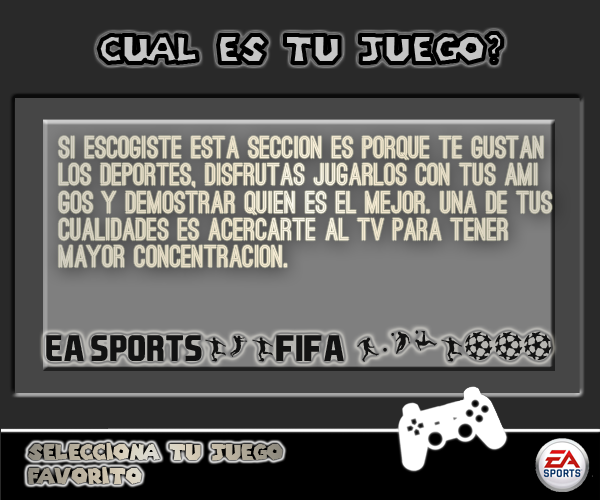
<style>
.page{position:relative;width:600px;height:500px;background:#292929}
.page>*{position:absolute;margin:0}
.t1{font:38.2px "SuperMarioGalaxy";scale:0.97 1}
.t2{font:29.4px "OstrichSans-Bold";color:#ece1cb;scale:0.97 1}
.t3{font:35.3px "EASPORTS";color:#121212;scale:0.97 1}
.t4{font:35.3px "SoccerII";color:#121212;scale:0.97 1}
.t5{font:35.3px "Premiership";color:#121212;scale:0.97 1}
.t6{font:21.6px/33px "SuperMarioGalaxy";scale:0.97 1}
</style>
<div class="page">
<p class="t1" style="left:98px;top:33px;width:405px;height:30px">Cual es tu juego?</p>
<p class="t2" style="left:58px;top:136px;width:494px;height:132px">Si escogiste esta seccion es porque te gustan <br>los deportes, disfrutas jugarlos con tus ami<br>gos y demostrar quien es el mejor. Una de tus <br>cualidades es acercarte al tv para tener <br>mayor concentracion.</p>
<p class="t3" style="left:46px;top:330px;width:506px;height:32px">ea sports<span class="t4">ama</span>FIFA  <span class="t4">fgpa</span><span class="t5">guk</span></p>
<p class="t6" style="left:28px;top:443px;width:255px;height:41px">Selecciona tu juego <br>favorito</p>
</div>
